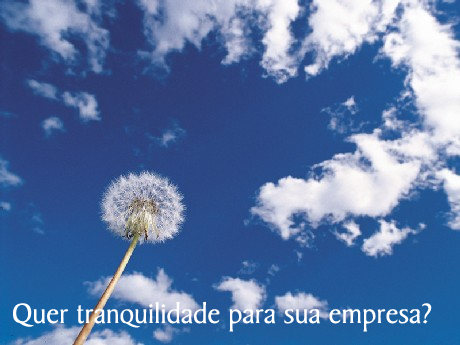
<style>
.page{position:relative;width:460px;height:345px}
.page>*{position:absolute;margin:0}
.t1{font:30px "BakerSignetAT-Roman";color:#fefefe}
</style>
<div class="page">
<p class="t1" style="left:13px;top:301px;width:419px;height:31px">Quer tranquilidade para sua empresa?</p>
</div>
